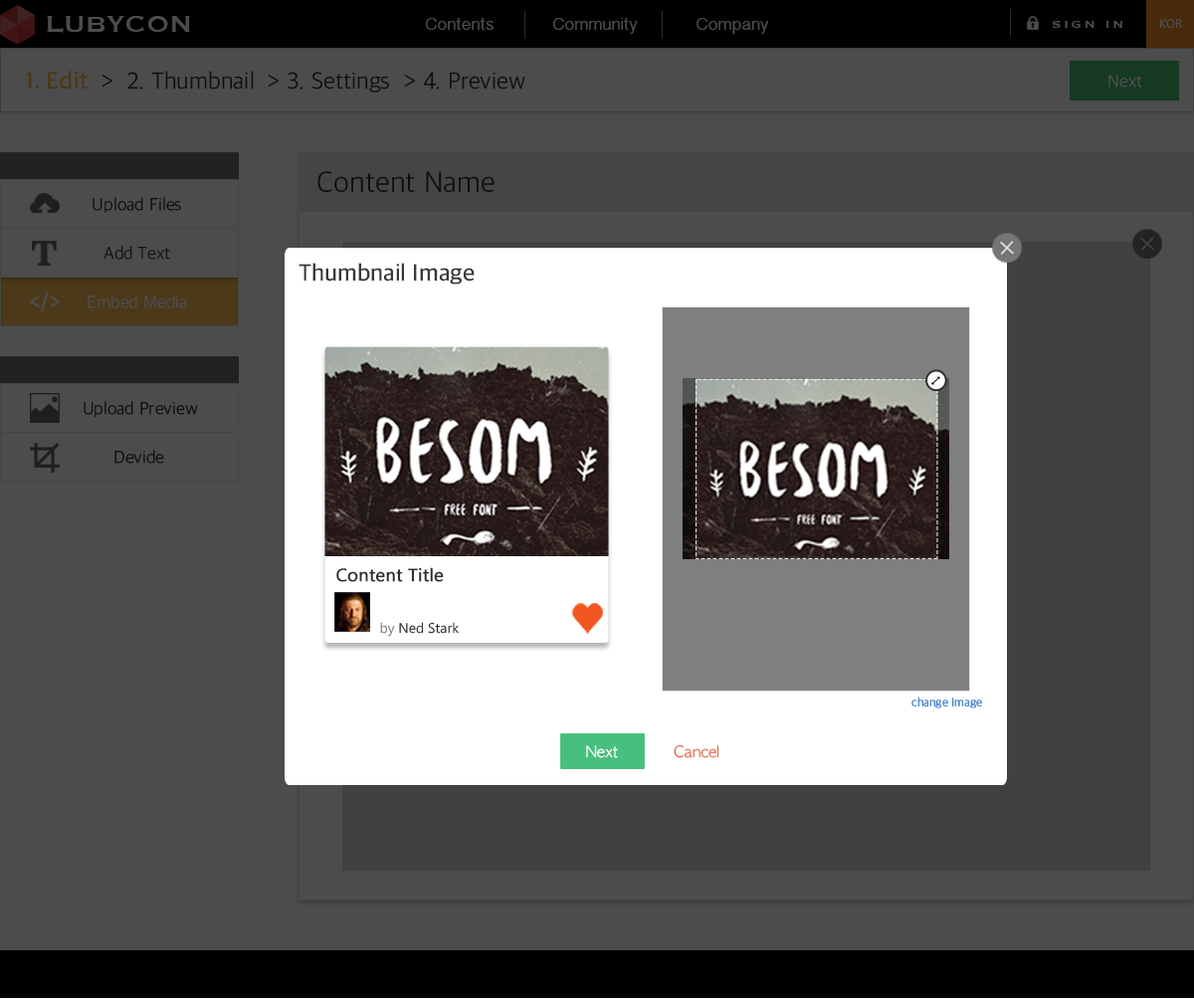
<style>
.page{position:relative;width:1194px;height:999px;background:#4c4c4c}
.page>*{position:absolute;margin:0}
.t1{font:29.8px "Copperplate";color:#4c4c4c}
.t2{font:17.9px "TamilSangamMN";color:#4c4c4c}
.t3{font:13.9px "Copperplate";letter-spacing:0.2em;color:#4c4c4c}
.t4{font:11.9px "LaoUI";color:#4c4c4c}
.t5{font:23.9px "AppleSDGothicNeo-Light";color:#101010}
.t6{font:23.9px "AppleSDGothicNeo-Bold";color:#101010}
.t7{font:17.9px "AppleSDGothicNeo-Light";color:#4c4c4c}
.t8{font:29.8px "AppleSDGothicNeo-Light";color:#0e0e0e}
.t9{font:17.9px "AppleSDGothicNeo-Light";color:#0e0e0e}
.t10{font:17.9px "AppleSDGothicNeo-Light";color:#151515}
.t11{font:23.9px "AppleSDGothicNeo-SemiBold";color:#383838}
.t12{font:17.7px "LaoUI";color:#2f2f2f;font-weight:bold}
.t13{font:13.8px "LaoUI";color:#2f2f2f}
.t14{font:13.8px "LaoUI";color:#808080}
.t15{font:11.9px "AppleSDGothicNeo-UltraLight";color:#488ccb;font-weight:bold}
.t16{font:14.9px "AppleGothic";color:#ffffff}
.t17{font:14.9px "AppleGothic";color:#ec6446}
</style>
<div class="page">
<p class="t1" style="left:47px;top:16px;width:143px;height:17px">LUBYCON</p>
<p class="t2" style="left:426px;top:18px;width:67px;height:12px">Contents</p>
<p class="t2" style="left:553px;top:18px;width:85px;height:16px">Community</p>
<p class="t2" style="left:696px;top:18px;width:73px;height:16px">Company</p>
<p class="t3" style="left:1053px;top:21px;width:69px;height:7px">SIGN IN</p>
<p class="t4" style="left:1160px;top:19px;width:23px;height:9px">KOR</p>
<p class="t5" style="left:26px;top:71px;width:499px;height:22px"><span class="t6">1. Edit</span>  &gt;  2. Thumbnail  &gt; 3. Settings  &gt; 4. Preview</p>
<p class="t7" style="left:1108px;top:75px;width:34px;height:13px">Next</p>
<p class="t8" style="left:317px;top:171px;width:177px;height:21px">Content Name</p>
<p class="t9" style="left:93px;top:197px;width:88px;height:16px">Upload Files</p>
<p class="t10" style="left:103px;top:246px;width:67px;height:14px">Add Text</p>
<p class="t11" style="left:298px;top:263px;width:177px;height:22px">Thumbnail Image</p>
<p class="t7" style="left:88px;top:294px;width:99px;height:14px">Embed Media</p>
<p class="t9" style="left:84px;top:401px;width:114px;height:16px">Upload Preview</p>
<p class="t9" style="left:114px;top:450px;width:50px;height:14px">Devide</p>
<p class="t12" style="left:336px;top:567px;width:108px;height:15px">Content Title</p>
<p class="t13" style="left:380px;top:622px;width:79px;height:15px"><span class="t14">by </span>Ned Stark</p>
<p class="t15" style="left:911px;top:696px;width:71px;height:12px">change Image</p>
<p class="t16" style="left:586px;top:745px;width:32px;height:13px">Next</p>
<p class="t17" style="left:674px;top:744px;width:45px;height:14px">Cancel</p>
</div>
